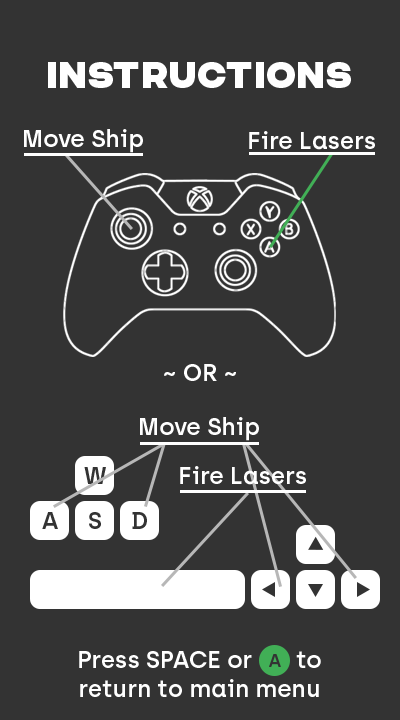
<style>
.page{position:relative;width:400px;height:720px;background:#333333}
.page>*{position:absolute;margin:0}
.t1{font:36px "CHANEY-Regular";color:#ffffff}
.t2{font:24px "Archia-SemiBold";color:#ffffff}
</style>
<div class="page">
<p class="t1" style="left:48px;top:62px;width:303px;height:26px">Instructions</p>
<p class="t2" style="left:24px;top:129px;width:119px;height:24px">Move Ship</p>
<p class="t2" style="left:249px;top:131px;width:126px;height:19px">Fire Lasers</p>
<p class="t2" style="left:164px;top:364px;width:72px;height:17px">~ OR ~</p>
<p class="t2" style="left:140px;top:417px;width:119px;height:24px">Move Ship</p>
<p class="t2" style="left:180px;top:466px;width:126px;height:19px">Fire Lasers</p>
<p class="t2" style="left:79px;top:651px;width:242px;height:47px;text-align:center">Press SPACE or       to<br>return to main menu</p>
</div>
